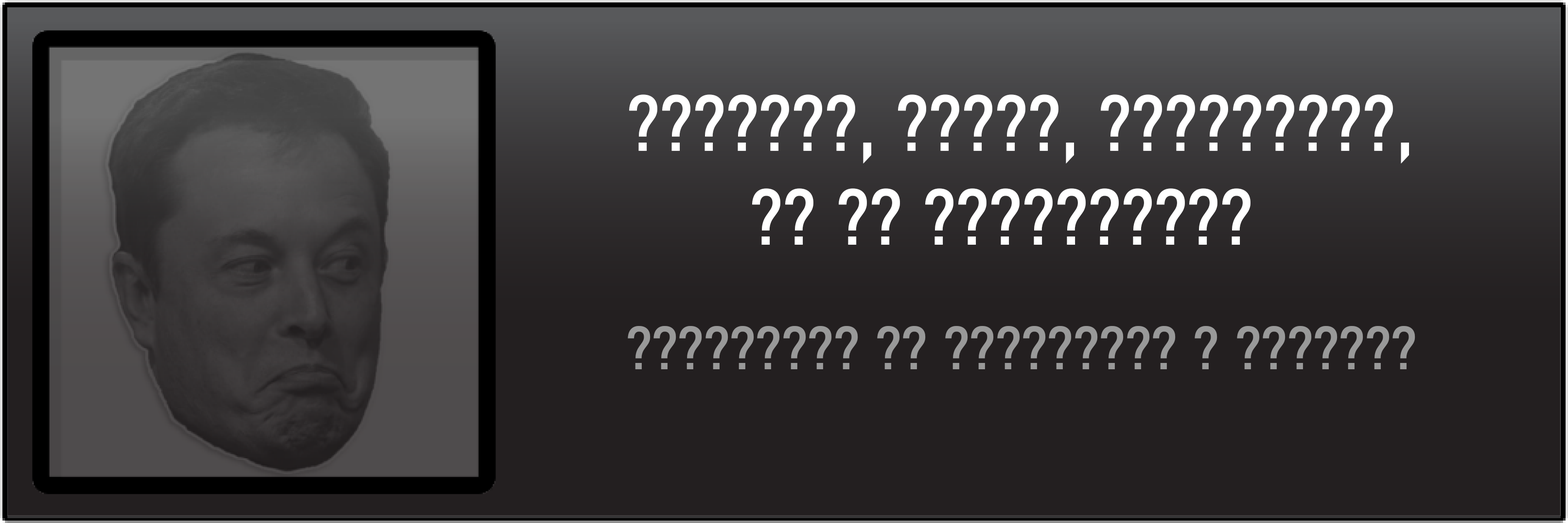
<style>
.page{position:relative;width:1568px;height:523px;background:#231f20}
.page>*{position:absolute;margin:0}
.t1{font:78.2px "Bahnschrift";color:#ffffff}
.t2{font:60.1px "Bahnschrift";color:#999999}
</style>
<div class="page">
<p class="t1" style="left:629px;top:94px;width:780px;height:151px;text-align:justify">???????, ?????, ?????????, <br>            ?? ?? ??????????</p>
<p class="t2" style="left:628px;top:326px;width:787px;height:43px">????????? ?? ????????? ? ???????</p>
</div>
